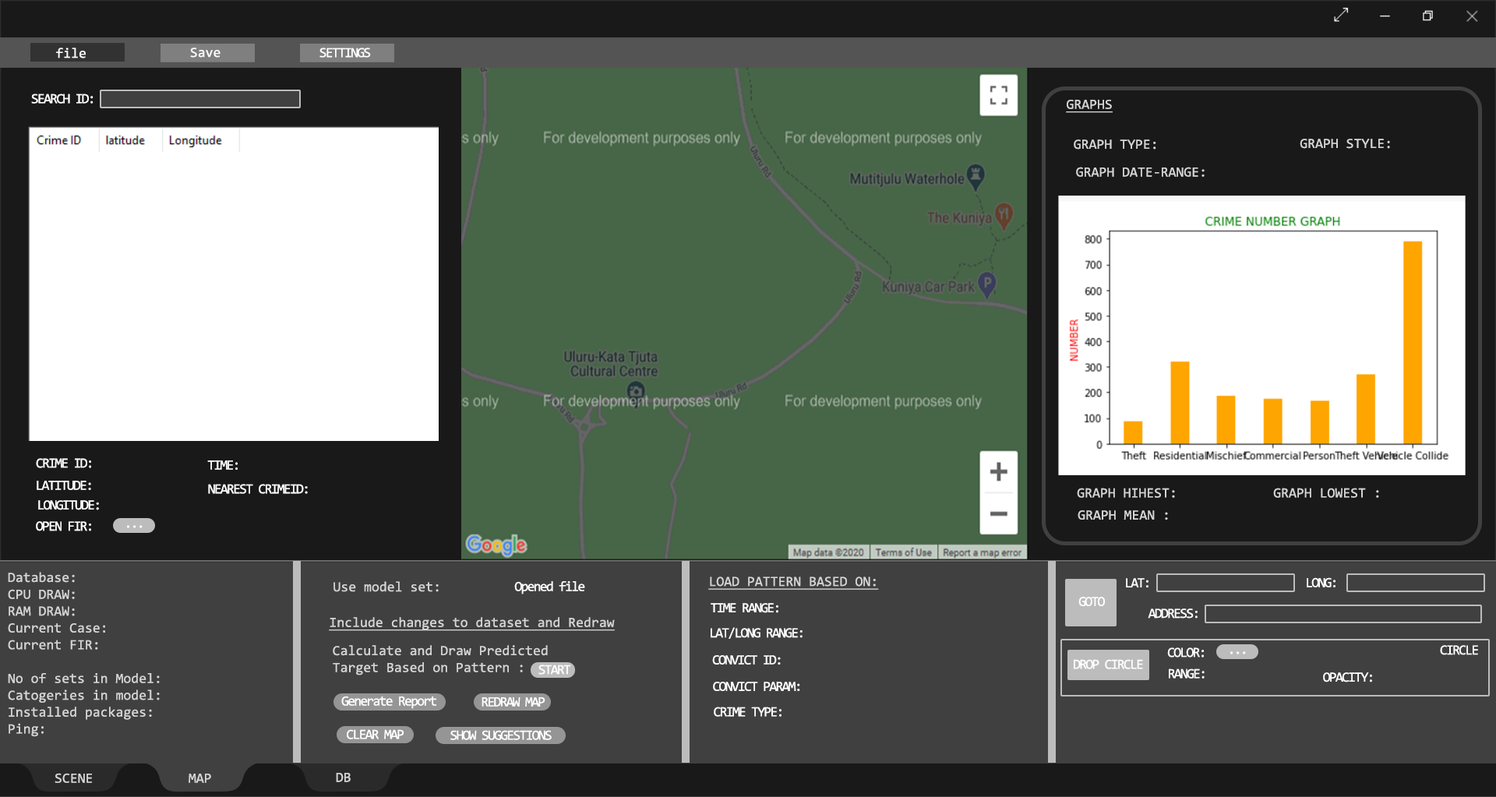
<style>
.page{position:relative;width:1496px;height:797px;background:#191919}
.page>*{position:absolute;margin:0}
.t1{font:14px "Consolas";color:#ffffff}
.t2{font:14px "Consolas";letter-spacing:-0.1em;color:#ffffff}
.t3{font:14px "Consolas";color:#d5d5d5;text-decoration:underline}
.t4{font:14px "Consolas";color:#d5d5d5}
.t5{font:14px "Consolas";color:#d7d7d7}
</style>
<div class="page">
<p class="t1" style="left:56px;top:48px;width:30px;height:10px">file</p>
<p class="t1" style="left:190px;top:48px;width:31px;height:10px">Save</p>
<p class="t2" style="left:319px;top:48px;width:52px;height:10px">SETTINGS</p>
<p class="t2" style="left:31px;top:93px;width:62px;height:11px">SEARCH ID:</p>
<p class="t3" style="left:1066px;top:100px;width:47px;height:13px">GRAPHS</p>
<p class="t4" style="left:1074px;top:139px;width:82px;height:11px">GRAPH TYPE:</p>
<p class="t4" style="left:1300px;top:139px;width:90px;height:10px">GRAPH STYLE:</p>
<p class="t4" style="left:1076px;top:167px;width:129px;height:10px">GRAPH DATE-RANGE:</p>
<p class="t2" style="left:36px;top:458px;width:55px;height:10px">CRIME ID:</p>
<p class="t2" style="left:207px;top:460px;width:31px;height:10px">TIME:</p>
<p class="t2" style="left:37px;top:481px;width:54px;height:9px">LATITUDE:</p>
<p class="t2" style="left:208px;top:484px;width:100px;height:10px">NEAREST CRIMEID:</p>
<p class="t4" style="left:1077px;top:488px;width:302px;height:10px">GRAPH HIHEST:     GRAPH LOWEST :</p>
<p class="t2" style="left:38px;top:500px;width:61px;height:10px">LONGITUDE:</p>
<p class="t2" style="left:36px;top:521px;width:55px;height:10px">OPEN FIR:</p>
<p class="t4" style="left:1078px;top:510px;width:90px;height:10px">GRAPH MEAN :</p>
<p class="t2" style="left:127px;top:525px;width:16px;height:3px">...</p>
<p class="t4" style="left:8px;top:572px;width:152px;height:165px">Database:<br>CPU DRAW:      <br>RAM DRAW:   <br>Current Case:<br>Current FIR:<br><br>No of sets in Model:<br>Catogeries in model:<br>Installed packages:<br>Ping:</p>
<p class="t4" style="left:333px;top:581px;width:106px;height:11px">Use model set:</p>
<p class="t2" style="left:514px;top:581px;width:71px;height:14px">Opened file</p>
<p class="t3" style="left:708px;top:577px;width:171px;height:13px">LOAD PATTERN BASED ON:</p>
<p class="t2" style="left:1126px;top:578px;width:22px;height:9px">LAT:</p>
<p class="t2" style="left:1307px;top:577px;width:28px;height:10px">LONG:</p>
<p class="t2" style="left:711px;top:603px;width:67px;height:10px">TIME RANGE:</p>
<p class="t2" style="left:1078px;top:597px;width:27px;height:9px">GOTO</p>
<p class="t3" style="left:329px;top:617px;width:286px;height:14px">Include changes to dataset and Redraw</p>
<p class="t2" style="left:1148px;top:609px;width:50px;height:10px">ADDRESS:</p>
<p class="t2" style="left:711px;top:627px;width:92px;height:12px">LAT/LONG RANGE:</p>
<p class="t4" style="left:333px;top:645px;width:215px;height:31px">Calculate and Draw Predicted <br>Target Based on Pattern :</p>
<p class="t2" style="left:1167px;top:647px;width:37px;height:11px">COLOR:</p>
<p class="t2" style="left:1230px;top:651px;width:16px;height:3px">...</p>
<p class="t2" style="left:1440px;top:645px;width:38px;height:10px">CIRCLE</p>
<p class="t2" style="left:538px;top:665px;width:33px;height:10px">START</p>
<p class="t2" style="left:712px;top:655px;width:69px;height:10px">CONVICT ID:</p>
<p class="t2" style="left:1074px;top:659px;width:69px;height:10px">DROP CIRCLE</p>
<p class="t2" style="left:1169px;top:669px;width:36px;height:10px">RANGE:</p>
<p class="t2" style="left:1323px;top:672px;width:49px;height:11px">OPACITY:</p>
<p class="t2" style="left:713px;top:682px;width:87px;height:9px">CONVICT PARAM:</p>
<p class="t2" style="left:341px;top:696px;width:95px;height:13px">Generate Report</p>
<p class="t2" style="left:482px;top:697px;width:63px;height:10px">REDRAW MAP</p>
<p class="t2" style="left:714px;top:707px;width:68px;height:10px">CRIME TYPE:</p>
<p class="t2" style="left:347px;top:729px;width:57px;height:10px">CLEAR MAP</p>
<p class="t2" style="left:450px;top:730px;width:102px;height:10px">SHOW SUGGESTIONS</p>
<p class="t5" style="left:55px;top:773px;width:37px;height:10px">SCENE</p>
<p class="t5" style="left:189px;top:774px;width:22px;height:9px">MAP</p>
<p class="t5" style="left:336px;top:773px;width:15px;height:9px">DB</p>
</div>
